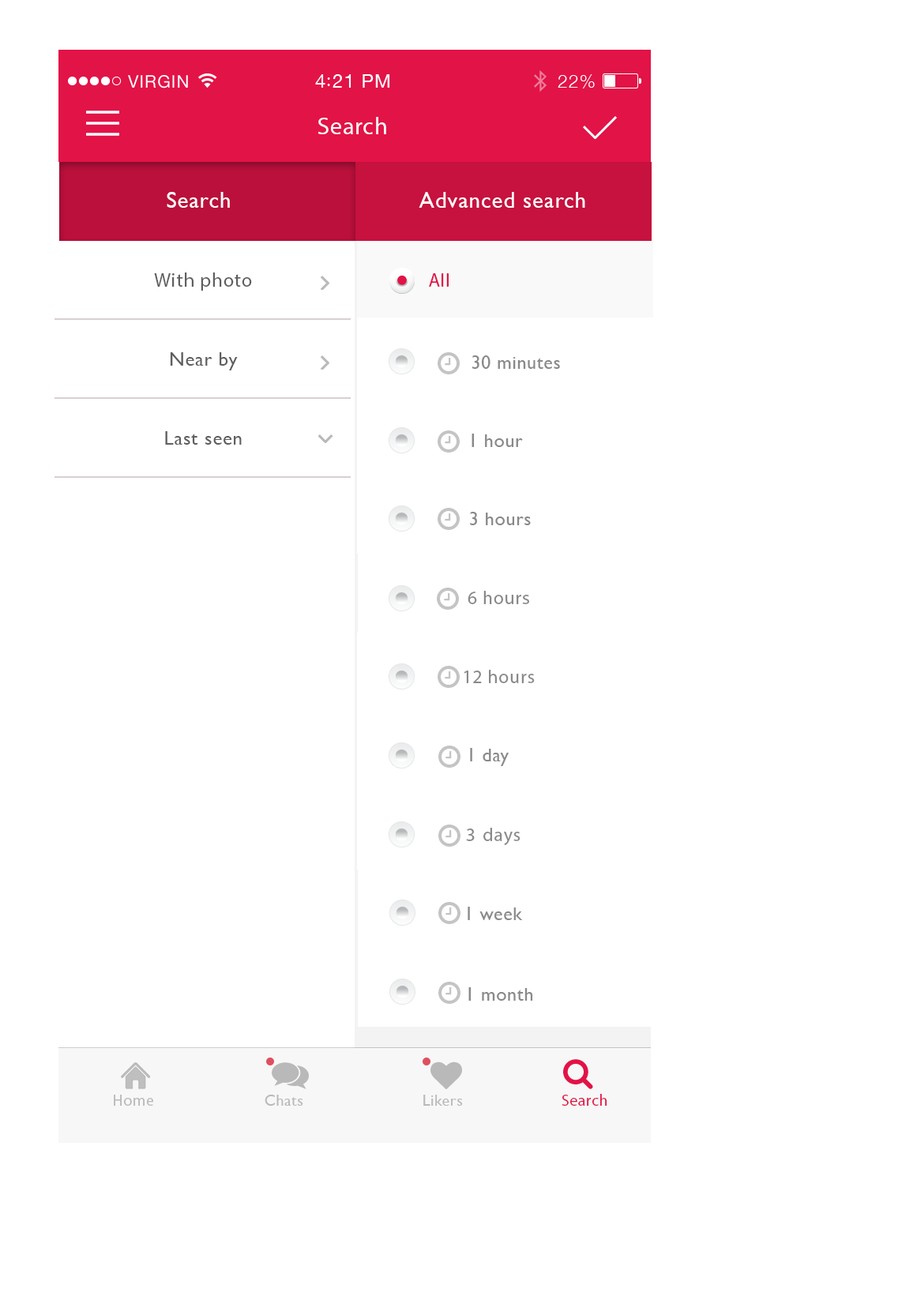
<style>
.page{position:relative;width:917px;height:1300px;background:#ffffff}
.page>*{position:absolute;margin:0}
.t1{font:23.7px "MyriadPro-Regular";letter-spacing:0.029em;color:#ffffff}
.t2{font:23px "GillSans";letter-spacing:0.029em;color:#ffffff}
.t3{font:19.7px "MyriadPro-Regular";letter-spacing:0.029em;color:#5f5f5f}
.t4{font:19px "MyriadPro-Regular";letter-spacing:0.029em;color:#e21347}
.t5{font:19.7px "GillSans";letter-spacing:0.029em;color:#5f5f5f}
.t6{font:19px "GillSans";letter-spacing:0.029em;color:#898989}
.t7{font:19px "MyriadPro-Regular";letter-spacing:0.029em;color:#898989}
.t8{font:15.8px "GillSans";letter-spacing:0.029em;color:#b9b9b9}
.t9{font:15.8px "GillSans";letter-spacing:0.029em;color:#e21347}
</style>
<div class="page">
<p class="t1" style="left:318px;top:117px;width:68px;height:17px">Search</p>
<p class="t2" style="left:167px;top:192px;width:63px;height:16px">Search</p>
<p class="t2" style="left:419px;top:192px;width:166px;height:16px">Advanced search</p>
<p class="t3" style="left:154px;top:273px;width:98px;height:18px">With photo</p>
<p class="t4" style="left:429px;top:273px;width:20px;height:14px">All</p>
<p class="t5" style="left:170px;top:352px;width:68px;height:18px">Near by</p>
<p class="t6" style="left:472px;top:355px;width:88px;height:14px">30 minutes</p>
<p class="t5" style="left:165px;top:431px;width:77px;height:14px">Last seen</p>
<p class="t6" style="left:472px;top:434px;width:51px;height:13px">1 hour</p>
<p class="t6" style="left:470px;top:512px;width:61px;height:13px">3 hours</p>
<p class="t7" style="left:468px;top:591px;width:61px;height:13px">6 hours</p>
<p class="t6" style="left:464px;top:670px;width:71px;height:13px">12 hours</p>
<p class="t6" style="left:470px;top:748px;width:39px;height:18px">1 day</p>
<p class="t7" style="left:466px;top:828px;width:55px;height:17px">3 days</p>
<p class="t6" style="left:468px;top:907px;width:55px;height:13px">1 week</p>
<p class="t6" style="left:468px;top:987px;width:65px;height:14px">1 month</p>
<p class="t8" style="left:114px;top:1095px;width:39px;height:11px">Home</p>
<p class="t8" style="left:265px;top:1095px;width:38px;height:11px">Chats</p>
<p class="t8" style="left:423px;top:1095px;width:40px;height:11px">Likers</p>
<p class="t9" style="left:562px;top:1094px;width:45px;height:12px">Search</p>
</div>
